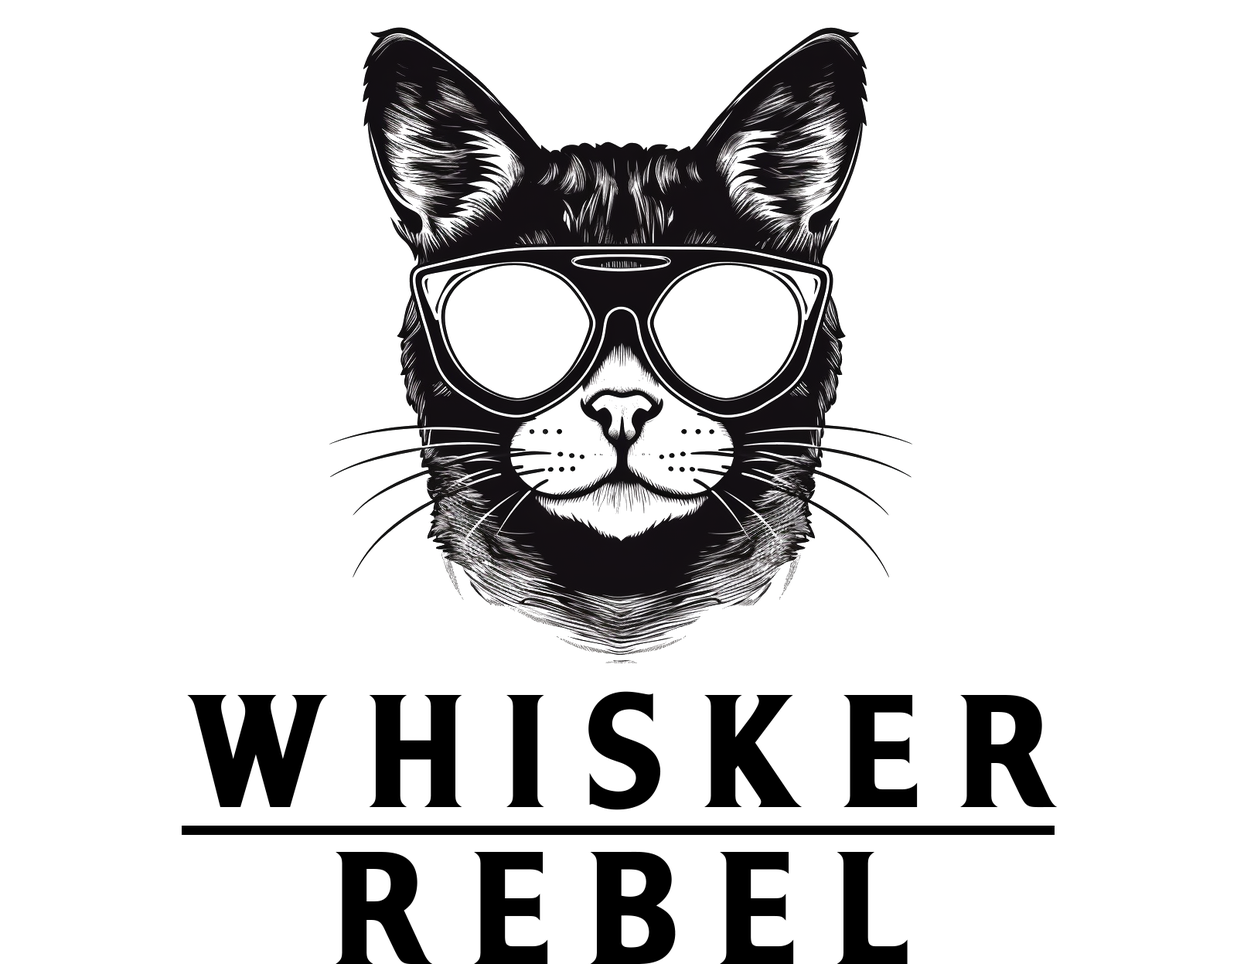
<style>
.page{position:relative;width:1237px;height:964px;background:#ffffff}
.page>*{position:absolute;margin:0}
.t1{font:143px/156.9px "OPTIAltheaBold-Two";letter-spacing:0.26em;color:#000000}
</style>
<div class="page">
<p class="t1" style="left:187px;top:691px;width:871px;height:274px;text-align:center">WHISKER REBEL</p>
</div>
